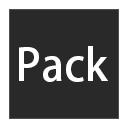
<style>
.page{position:relative;width:128px;height:128px;background:#292929}
.page>*{position:absolute;margin:0}
.t1{font:44px "AdobeHeitiStd-Regular";color:#ffffff}
</style>
<div class="page">
<p class="t1" style="left:19px;top:46px;width:89px;height:36px">Pack</p>
</div>
